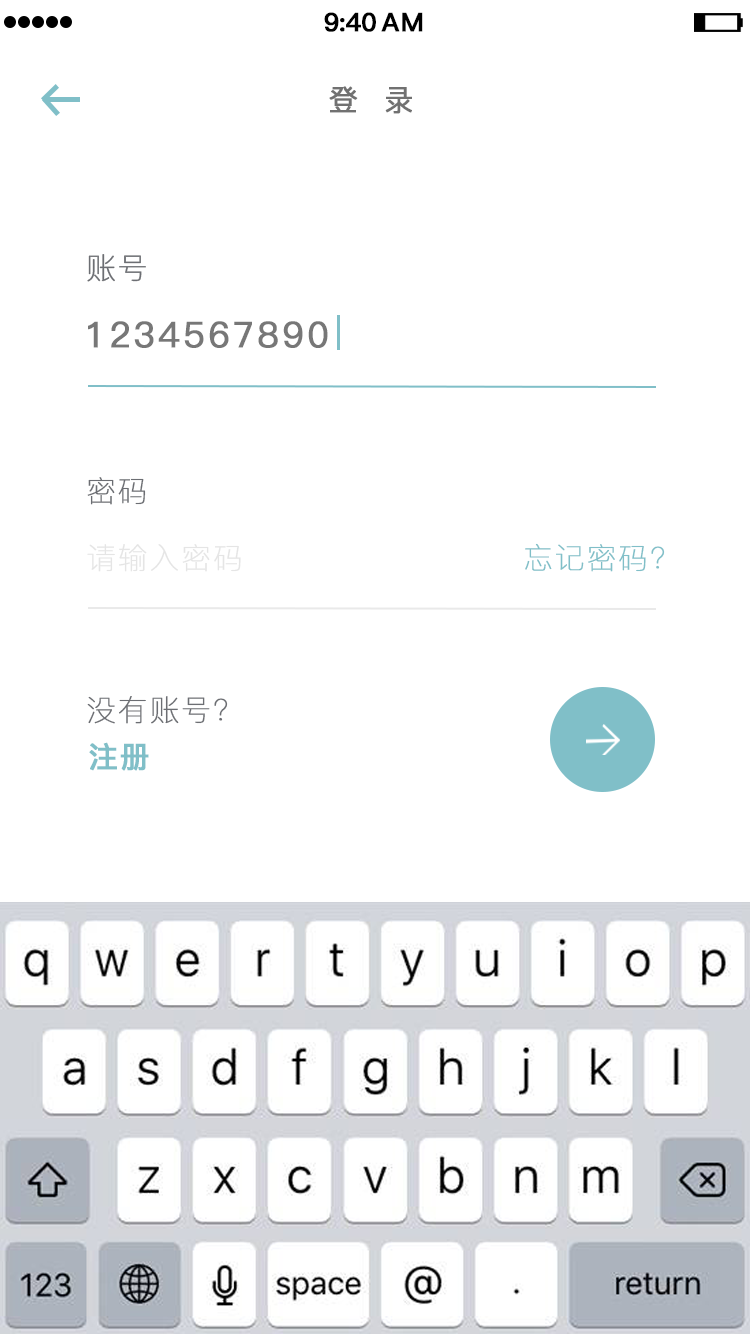
<style>
.page{position:relative;width:750px;height:1334px;background:#ffffff}
.page>*{position:absolute;margin:0}
.t1{font:25.4px "PingFang-SC-Bold";letter-spacing:-0.028em;color:#000000;font-weight:bold}
.t2{font:25.4px "PingFang-SC-Bold";letter-spacing:0.052em;color:#000000;font-weight:bold}
.t3{font:29.4px "PingFang-SC-Medium";letter-spacing:0.052em;color:#717171;font-weight:bold}
.t4{font:29.4px "PingFang-SC-ExtraLight";letter-spacing:0.052em;color:#6c6e73;font-weight:bold}
.t5{font:35.4px "PingFang-SC-Medium";letter-spacing:0.072em;color:#777777;font-weight:bold}
.t6{font:29.4px "PingFang-SC-ExtraLight";letter-spacing:0.052em;color:#e5e5e5;font-weight:bold}
.t7{font:29.4px "PingFang-SC-ExtraLight";letter-spacing:0.052em;color:#80bfc8;font-weight:bold}
.t8{font:29.4px "PingFang-SC-Bold";letter-spacing:0.052em;color:#80bfc8;font-weight:bold}
</style>
<div class="page">
<p class="t1" style="left:324px;top:12px;width:52px;height:20px">9:40</p>
<p class="t2" style="left:381px;top:12px;width:42px;height:20px">AM</p>
<p class="t3" style="left:329px;top:86px;width:83px;height:28px">登  录</p>
<p class="t4" style="left:87px;top:254px;width:59px;height:28px">账号</p>
<p class="t5" style="left:88px;top:321px;width:240px;height:27px">1234567890</p>
<p class="t4" style="left:87px;top:477px;width:59px;height:28px">密码</p>
<p class="t6" style="left:87px;top:544px;width:154px;height:28px">请输入密码</p>
<p class="t7" style="left:525px;top:543px;width:140px;height:29px">忘记密码？</p>
<p class="t4" style="left:87px;top:696px;width:141px;height:28px">没有账号？</p>
<p class="t8" style="left:89px;top:742px;width:60px;height:29px">注册</p>
</div>
